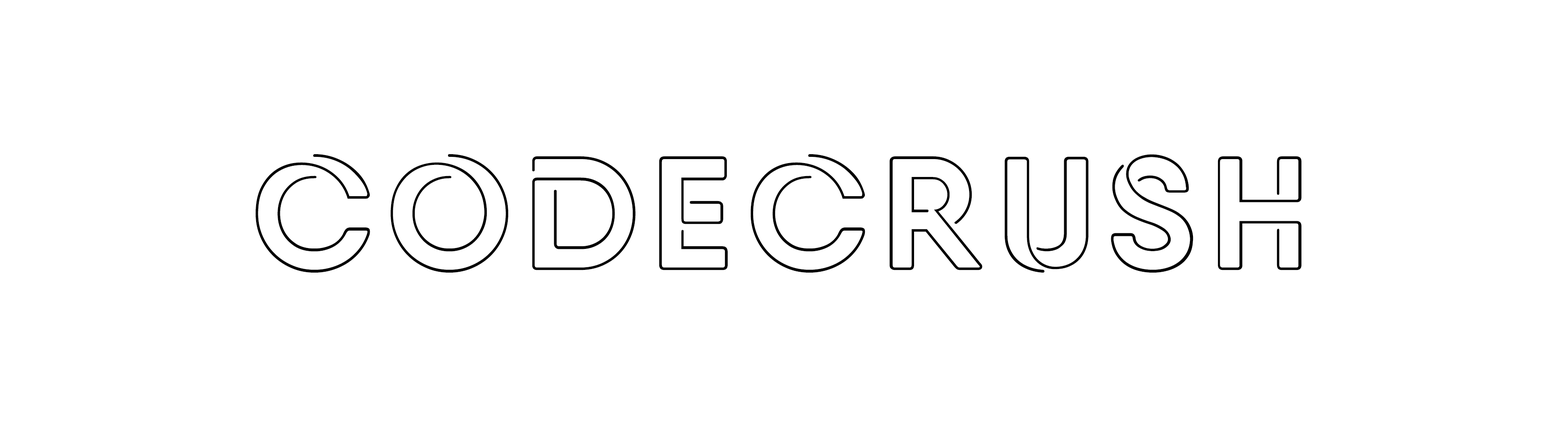
<style>
.page{position:relative;width:1568px;height:429px;background:#ffffff}
.page>*{position:absolute;margin:0}
.t1{font:186.2px "NEON";letter-spacing:0.081em;color:#000000}
</style>
<div class="page">
<p class="t1" style="left:255px;top:154px;width:1047px;height:119px">codecrush</p>
</div>
